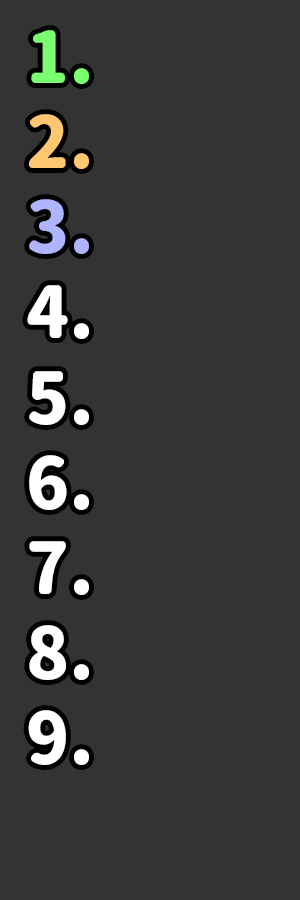
<style>
.page{position:relative;width:300px;height:900px;background:#333333}
.page>*{position:absolute;margin:0}
.t1{font:71px "GenJyuuGothic-P-Heavy";color:#ffffff}
.t2{font:71px "GenJyuuGothic-P-Heavy";color:#79ff6f}
.t3{font:71px "GenJyuuGothic-P-Heavy";color:#ffc76f}
.t4{font:71px "GenJyuuGothic-P-Heavy";color:#aeb4fe}
</style>
<div class="page">
<p class="t1" style="left:27px;top:30px;width:62px;height:735px"><span class="t2">1.<br></span><span class="t3">2.<br></span><span class="t4">3.<br></span>4.<br>5.<br>6.<br>7.<br>8.<br>9.</p>
</div>
